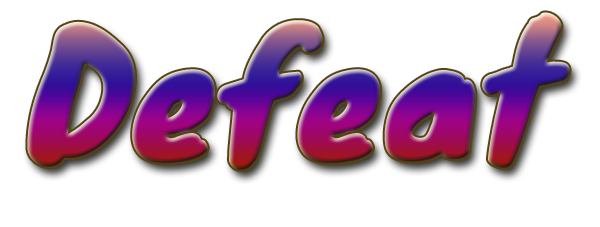
<style>
.page{position:relative;width:600px;height:227px;background:#ffffff}
.page>*{position:absolute;margin:0}
.t1{font:170px "Knewave";font-weight:bold}
</style>
<div class="page">
<p class="t1" style="left:27px;top:12px;width:543px;height:158px">Defeat</p>
</div>
